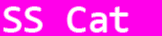
<style>
.page{position:relative;width:162px;height:36px;background:#ff00ea}
.page>*{position:absolute;margin:0}
.t1{font:39px "Consolas";color:#ffffff}
</style>
<div class="page">
<p class="t1" style="left:4px;top:7px;width:124px;height:25px">SS Cat</p>
</div>
